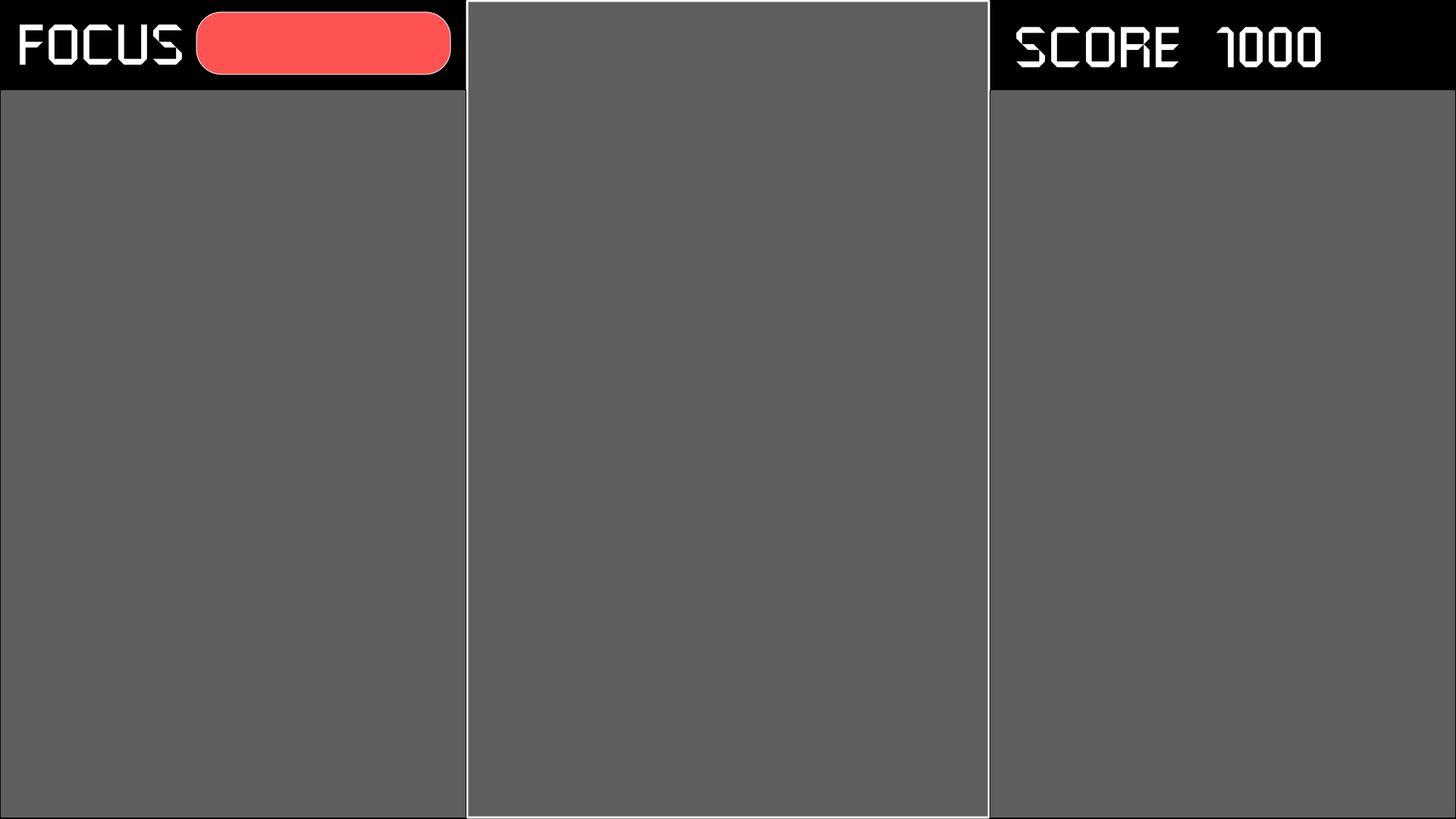
<style>
.page{position:relative;width:1456px;height:819px;background:#5e5e5e}
.page>*{position:absolute;margin:0}
.t1{font:56.9px "RMSSansRegular";letter-spacing:0.04em;color:#ffffff}
</style>
<div class="page">
<p class="t1" style="left:20px;top:24px;width:162px;height:41px">FOCUS</p>
<p class="t1" style="left:1016px;top:27px;width:305px;height:40px">SCORE  1000</p>
</div>
